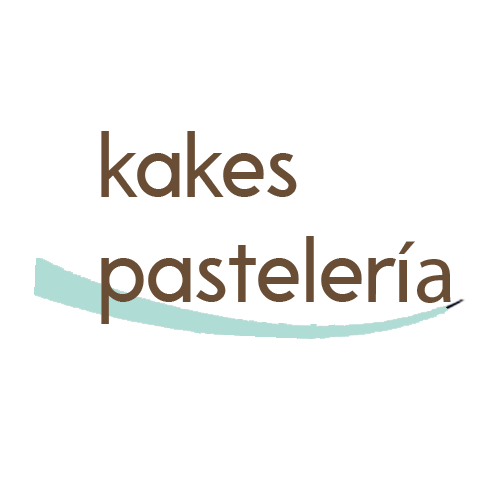
<style>
.page{position:relative;width:500px;height:500px;background:#ffffff}
.page>*{position:absolute;margin:0}
.t1{font:87.5px "APompadourSample";color:#694d35}
.t2{font:87.5px "MyriadPro-Regular";color:#694d35}
</style>
<div class="page">
<p class="t1" style="left:101px;top:131px;width:350px;height:193px">kakes <br>pasteler<span class="t2">ía</span></p>
</div>
